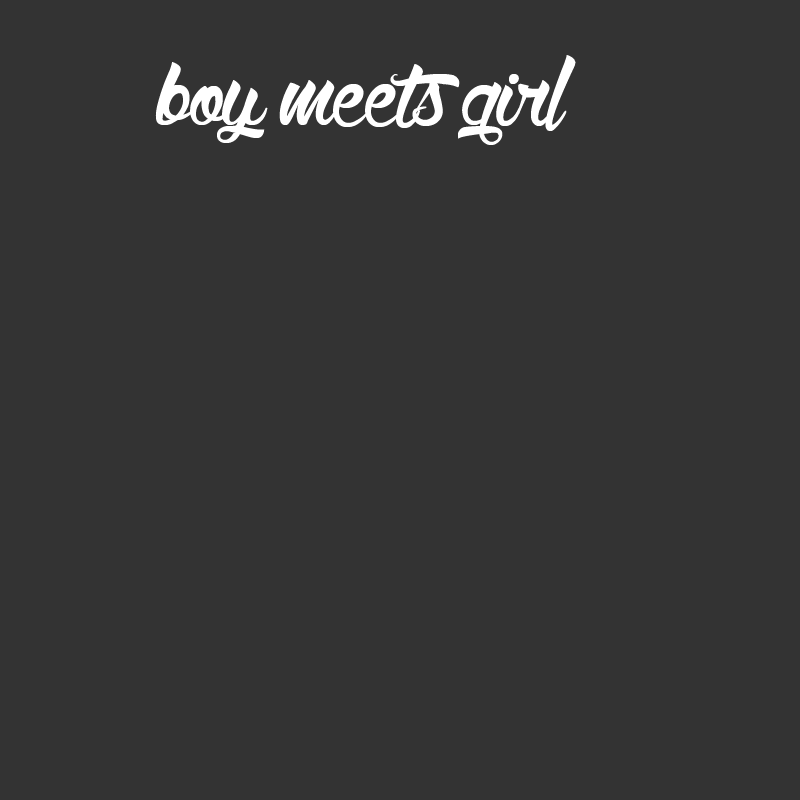
<style>
.page{position:relative;width:800px;height:800px;background:#333333}
.page>*{position:absolute;margin:0}
.t1{font:150px "WolfintheCity";color:#ffffff}
</style>
<div class="page">
<p class="t1" style="left:155px;top:55px;width:421px;height:90px">boy meets girl</p>
</div>
